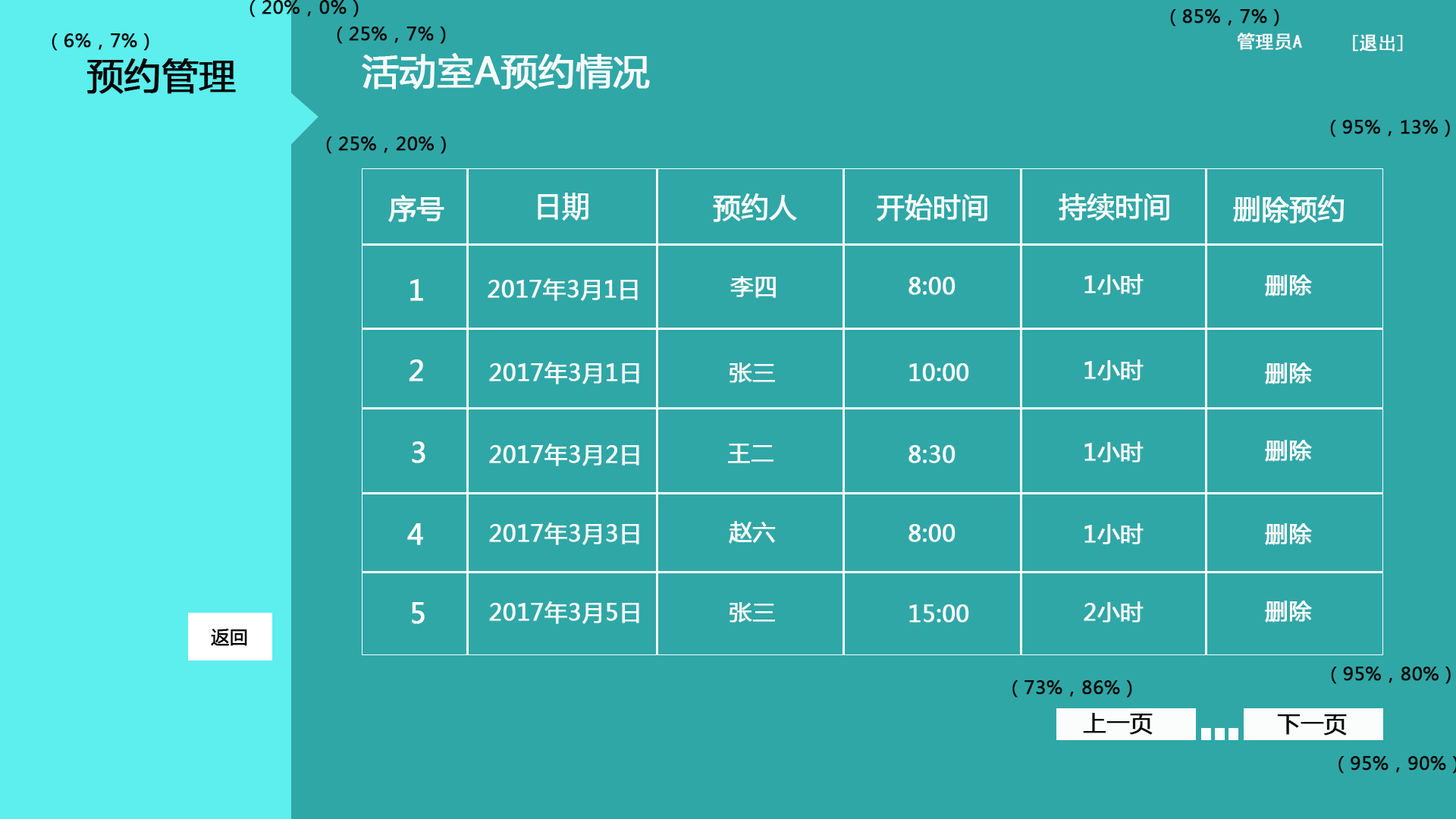
<style>
.page{position:relative;width:1456px;height:819px;background:#2fa7a7}
.page>*{position:absolute;margin:0}
.t1{font:18.2px "MicrosoftYaHei";color:#090909;font-weight:bold}
.t2{font:18.2px "SimHei";color:#fcfafa;font-weight:bold}
.t3{font:36.4px "MicrosoftYaHei";color:#f9fcfc;font-weight:bold}
.t4{font:36.4px "MicrosoftYaHei";color:#040404;font-weight:bold}
.t5{font:27.3px "MicrosoftYaHei";color:#fbfdfd;font-weight:bold}
.t6{font:22.7px "MicrosoftYaHei";color:#fbfdfd;font-weight:bold}
.t7{font:18.2px "MicrosoftYaHei";color:#050505;font-weight:bold}
.t8{font:22.7px "MicrosoftYaHei";color:#090909;font-weight:bold}
</style>
<div class="page">
<p class="t1" style="left:249px;top:0px;width:110px;height:17px">（20%，0%）</p>
<p class="t1" style="left:1170px;top:9px;width:109px;height:18px">（85%，7%）</p>
<p class="t1" style="left:337px;top:27px;width:109px;height:17px">（25%，7%）</p>
<p class="t1" style="left:52px;top:33px;width:97px;height:18px">（6%，7%）</p>
<p class="t2" style="left:1237px;top:33px;width:65px;height:17px">管理员A</p>
<p class="t2" style="left:1353px;top:34px;width:50px;height:18px">[退出]</p>
<p class="t3" style="left:362px;top:53px;width:288px;height:36px">活动室A预约情况</p>
<p class="t4" style="left:86px;top:58px;width:150px;height:36px">预约管理</p>
<p class="t1" style="left:1330px;top:120px;width:120px;height:17px">（95%，13%）</p>
<p class="t1" style="left:326px;top:136px;width:120px;height:18px">（25%，20%）</p>
<p class="t5" style="left:388px;top:195px;width:56px;height:27px">序号</p>
<p class="t5" style="left:538px;top:193px;width:50px;height:28px">日期</p>
<p class="t5" style="left:713px;top:193px;width:84px;height:29px">预约人</p>
<p class="t5" style="left:877px;top:194px;width:110px;height:27px">开始时间</p>
<p class="t5" style="left:1059px;top:193px;width:110px;height:28px">持续时间</p>
<p class="t5" style="left:1233px;top:195px;width:111px;height:29px">删除预约</p>
<p class="t5" style="left:410px;top:279px;width:13px;height:22px">1</p>
<p class="t6" style="left:488px;top:278px;width:150px;height:23px">2017年3月1日</p>
<p class="t6" style="left:730px;top:276px;width:46px;height:22px">李四</p>
<p class="t6" style="left:908px;top:277px;width:47px;height:18px">8:00</p>
<p class="t6" style="left:1084px;top:274px;width:60px;height:21px">1小时</p>
<p class="t6" style="left:1265px;top:275px;width:47px;height:22px">删除</p>
<p class="t5" style="left:409px;top:359px;width:14px;height:22px">2</p>
<p class="t6" style="left:489px;top:362px;width:150px;height:22px">2017年3月1日</p>
<p class="t6" style="left:730px;top:362px;width:45px;height:21px">张三</p>
<p class="t6" style="left:909px;top:363px;width:60px;height:18px">10:00</p>
<p class="t6" style="left:1084px;top:359px;width:60px;height:22px">1小时</p>
<p class="t6" style="left:1265px;top:362px;width:47px;height:22px">删除</p>
<p class="t5" style="left:412px;top:441px;width:13px;height:22px">3</p>
<p class="t6" style="left:489px;top:444px;width:150px;height:22px">2017年3月2日</p>
<p class="t6" style="left:728px;top:444px;width:45px;height:19px">王二</p>
<p class="t6" style="left:908px;top:445px;width:47px;height:18px">8:30</p>
<p class="t6" style="left:1084px;top:441px;width:60px;height:22px">1小时</p>
<p class="t6" style="left:1265px;top:440px;width:47px;height:22px">删除</p>
<p class="t6" style="left:729px;top:521px;width:47px;height:23px">赵六</p>
<p class="t5" style="left:407px;top:523px;width:16px;height:22px">4</p>
<p class="t6" style="left:489px;top:522px;width:150px;height:23px">2017年3月3日</p>
<p class="t6" style="left:908px;top:524px;width:47px;height:18px">8:00</p>
<p class="t6" style="left:1084px;top:523px;width:60px;height:21px">1小时</p>
<p class="t6" style="left:1265px;top:523px;width:47px;height:22px">删除</p>
<p class="t5" style="left:412px;top:602px;width:13px;height:22px">5</p>
<p class="t6" style="left:489px;top:601px;width:150px;height:23px">2017年3月5日</p>
<p class="t6" style="left:730px;top:602px;width:45px;height:21px">张三</p>
<p class="t6" style="left:909px;top:604px;width:60px;height:19px">15:00</p>
<p class="t6" style="left:1084px;top:601px;width:60px;height:22px">2小时</p>
<p class="t6" style="left:1265px;top:601px;width:47px;height:22px">删除</p>
<p class="t7" style="left:211px;top:629px;width:36px;height:17px">返回</p>
<p class="t1" style="left:1331px;top:667px;width:120px;height:17px">（95%，80%）</p>
<p class="t1" style="left:1012px;top:680px;width:120px;height:18px">（73%，86%）</p>
<p class="t8" style="left:1083px;top:713px;width:70px;height:22px">上一页</p>
<p class="t8" style="left:1277px;top:714px;width:70px;height:22px">下一页</p>
</div>
